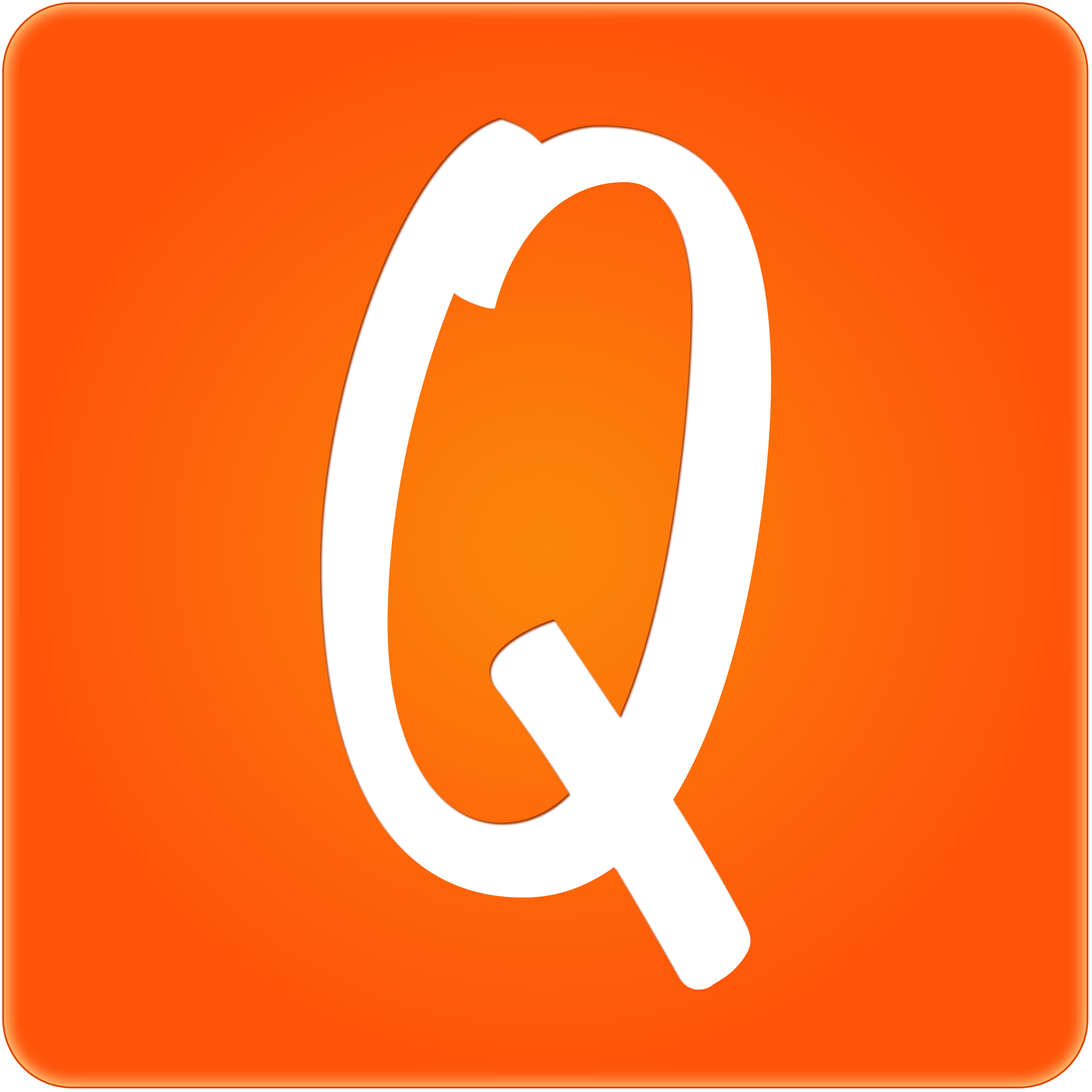
<style>
.page{position:relative;width:1092px;height:1092px}
.page>*{position:absolute;margin:0}
.t1{font:1053.7px "ReklameScript-RegularDEMO";color:#ffffff}
</style>
<div class="page">
<p class="t1" style="left:320px;top:117px;width:451px;height:873px">Q</p>
</div>
